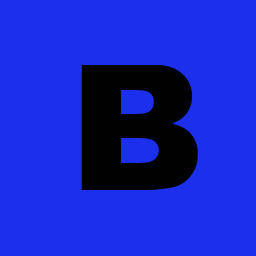
<style>
.page{position:relative;width:256px;height:256px;background:#1b2fed}
.page>*{position:absolute;margin:0}
.t1{font:174.7px "Arial-Black";color:#010101}
</style>
<div class="page">
<p class="t1" style="left:81px;top:65px;width:117px;height:125px">B</p>
</div>
